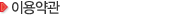
<style>
.page{position:relative;width:180px;height:18px;background:#ffffff}
.page>*{position:absolute;margin:0}
.t1{font:14.7px "YDIYGO330";letter-spacing:-0.03em;color:#373737;scale:0.92 1}
</style>
<div class="page">
<p class="t1" style="left:12px;top:1px;width:48px;height:14px">이용약관</p>
</div>
